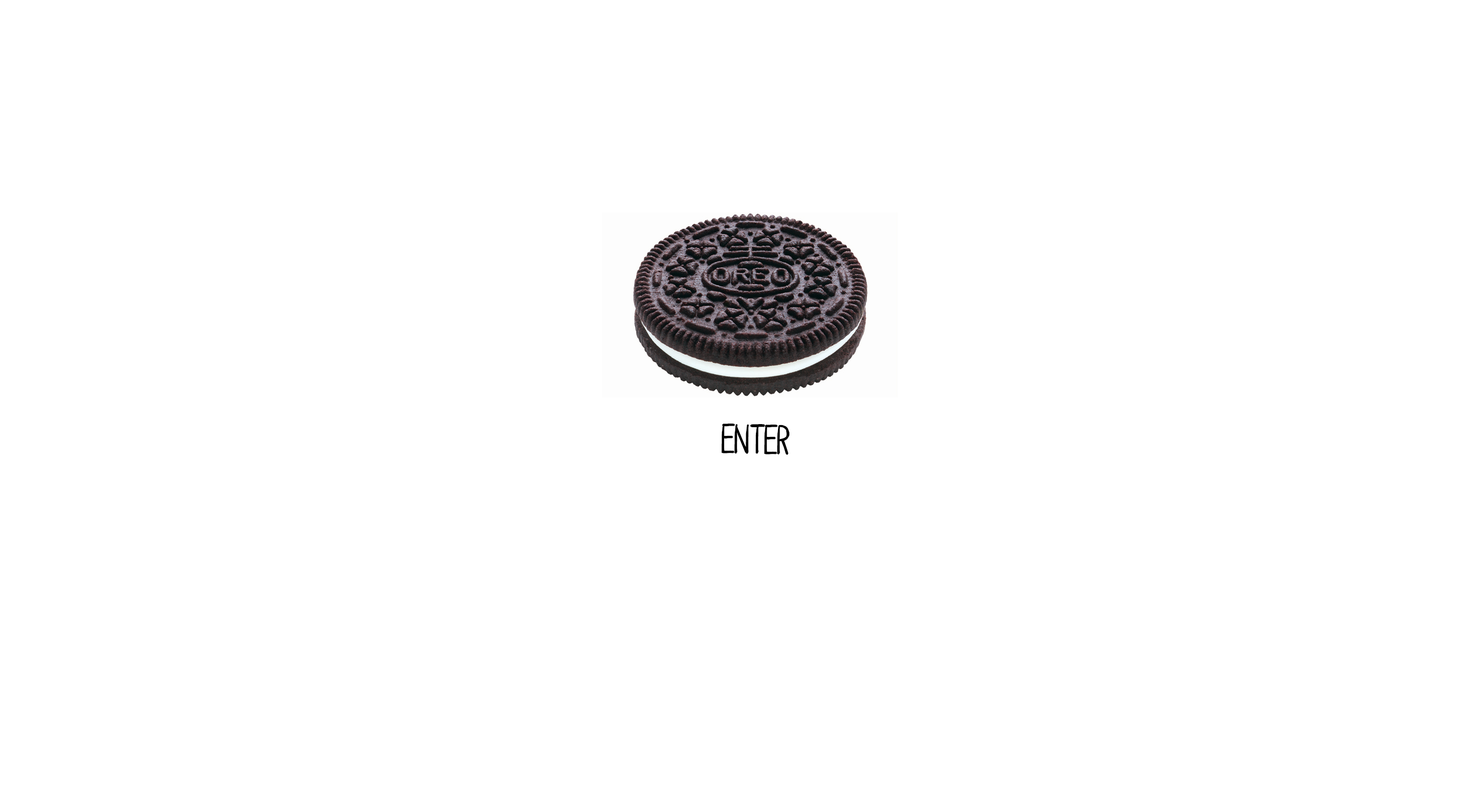
<style>
.page{position:relative;width:1481px;height:805px;background:#ffffff}
.page>*{position:absolute;margin:0}
.t1{font:29.8px "HBornToLose-Normal";color:#000000}
</style>
<div class="page">
<p class="t1" style="left:721px;top:424px;width:68px;height:31px;rotate:1deg">ENTER</p>
</div>
